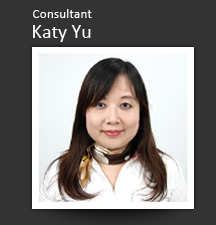
<style>
.page{position:relative;width:216px;height:225px;background:#333333}
.page>*{position:absolute;margin:0}
.t1{font:13.5px "Calibri";color:#ffffff}
.t2{font:19.9px "Calibri";color:#ffffff}
</style>
<div class="page">
<p class="t1" style="left:33px;top:9px;width:59px;height:9px">Consultant</p>
<p class="t2" style="left:33px;top:25px;width:58px;height:17px">Katy Yu</p>
</div>
